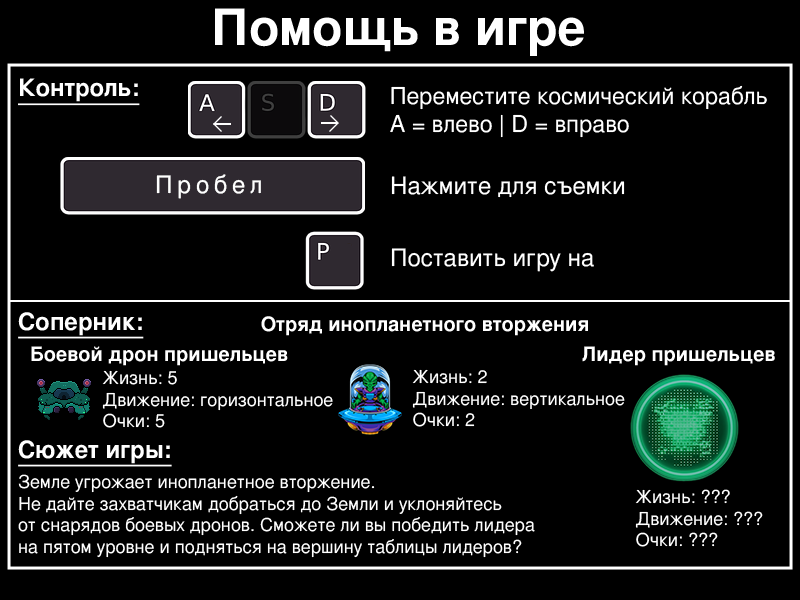
<style>
.page{position:relative;width:800px;height:600px;background:#000000}
.page>*{position:absolute;margin:0}
.t1{font:50px "FreeSansBold";color:#ffffff}
.t2{font:24px "FreeSansBold";color:#ffffff;text-decoration:underline}
.t3{font:23.2px "FreeSans";color:#ffffff}
.t4{font:24px "FreeSans";letter-spacing:0.2em;color:#ffffff}
.t5{font:24px "FreeSans";color:#ffffff}
.t6{font:20px "FreeSansBold";color:#ffffff}
.t7{font:18px "FreeSans";color:#ffffff}
</style>
<div class="page">
<p class="t1" style="left:215px;top:8px;width:369px;height:48px">Помощь в игре</p>
<p class="t2" style="left:18px;top:78px;width:122px;height:28px">Контроль:</p>
<p class="t3" style="left:390px;top:85px;width:377px;height:53px">Переместите космический корабль <br>A = влево | D = вправо</p>
<p class="t4" style="left:156px;top:174px;width:105px;height:25px">Пробел</p>
<p class="t5" style="left:391px;top:176px;width:234px;height:22px">Нажмите для съемки</p>
<p class="t5" style="left:391px;top:248px;width:203px;height:24px">Поставить игру на паузу</p>
<p class="t2" style="left:18px;top:312px;width:126px;height:27px">Соперник:</p>
<p class="t6" style="left:261px;top:316px;width:327px;height:20px">Отряд инопланетного вторжения</p>
<p class="t6" style="left:31px;top:346px;width:257px;height:20px">Боевой дрон пришельцев</p>
<p class="t6" style="left:582px;top:346px;width:193px;height:20px">Лидер пришельцев</p>
<p class="t7" style="left:102px;top:370px;width:231px;height:58px">Жизнь: 5<br>Движение: горизонтальное<br>Очки: 5</p>
<p class="t7" style="left:412px;top:369px;width:213px;height:58px">Жизнь: 2<br>Движение: вертикальное<br>Очки: 2</p>
<p class="t2" style="left:18px;top:440px;width:154px;height:27px">Сюжет игры:</p>
<p class="t7" style="left:18px;top:474px;width:517px;height:84px">Земле угрожает инопланетное вторжение. <br>Не дайте захватчикам добраться до Земли и уклоняйтесь <br>от снарядов боевых дронов. Сможете ли вы победить лидера <br>на пятом уровне и подняться на вершину таблицы лидеров?</p>
<p class="t7" style="left:635px;top:489px;width:128px;height:58px">Жизнь: ???<br>Движение: ???<br>Очки: ???</p>
</div>
